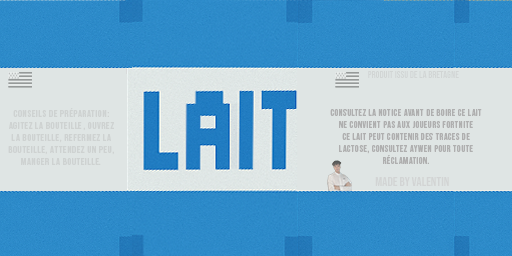
<style>
.page{position:relative;width:512px;height:256px;background:#dfe5e4}
.page>*{position:absolute;margin:0}
.t1{font:10px "BebasNeue-Regular";color:#d1d5d4}
.t2{font:10px "BebasNeue-Regular";letter-spacing:0.06em;color:#ced2d1}
.t3{font:10px "BebasNeue-Regular";letter-spacing:0.06em;color:#afafaf;scale:0.93 1}
.t4{font:13px "BebasNeue-Regular";color:#d2d4d4}
</style>
<div class="page">
<p class="t1" style="left:368px;top:71px;width:91px;height:7px">produit issu de la bretagne</p>
<p class="t2" style="left:8px;top:108px;width:106px;height:57px;text-align:center">conseils de préparation:<br>agitez la bouteille, ouvrez<br>la bouteille, refermez la<br>bouteille, attendez un peu,<br>manger la bouteille.</p>
<p class="t3" style="left:330px;top:109px;width:152px;height:55px;text-align:center">CONSULTEZ LA NOTICE AVANT DE BOIRE CE LAIT<br>NE CONVIENT PAS AUX JOUEURS FORTNITE<br>ce lait peut contenir des traces de lactose, consultez aywen pour toute réclamation.</p>
<p class="t4" style="left:375px;top:177px;width:74px;height:9px">Made by valentin</p>
</div>
